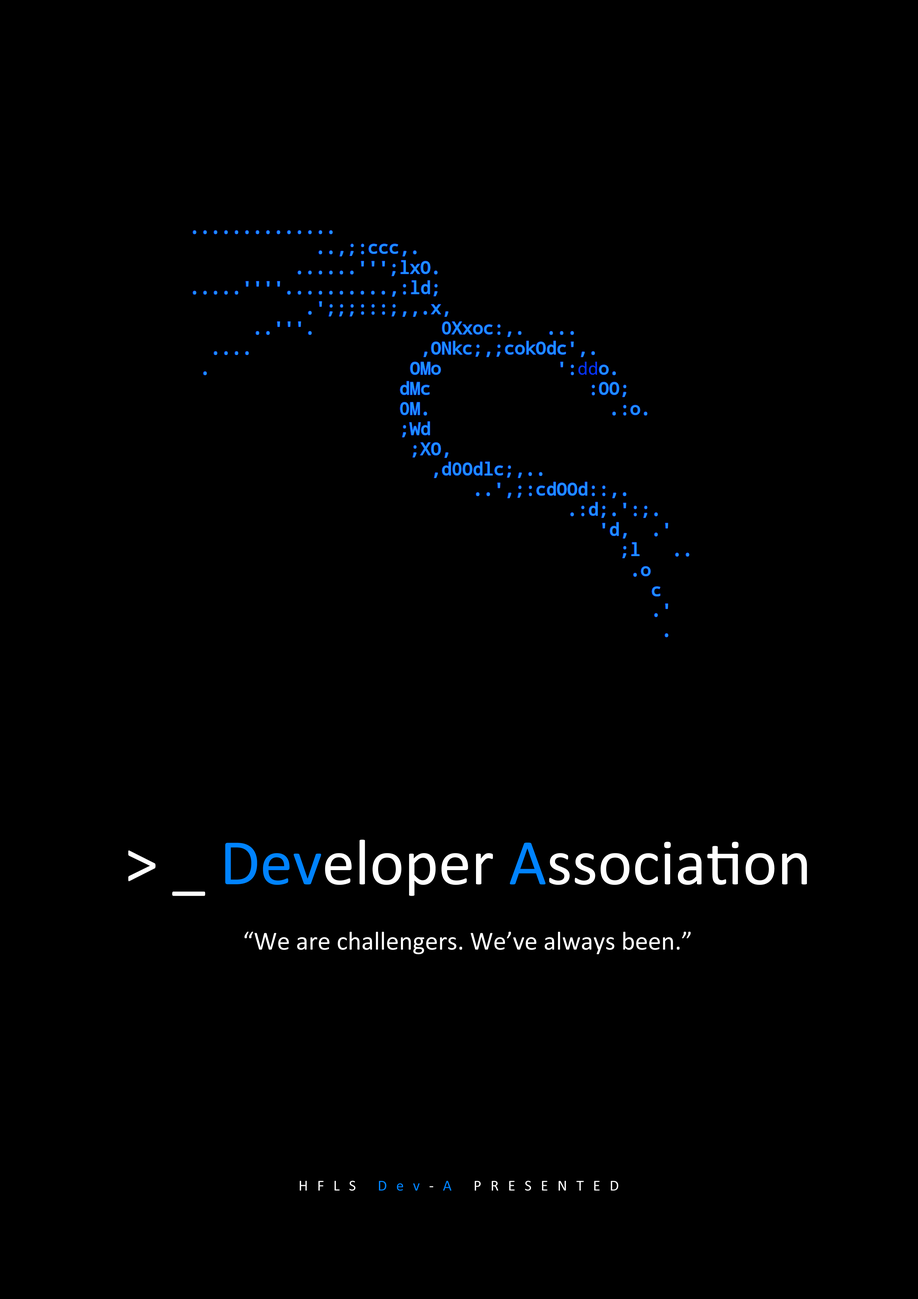
<style>
.page{position:relative;width:918px;height:1299px;background:#000000}
.page>*{position:absolute;margin:0}
.t1{font:65.4px "Calibri";color:#ffffff}
.t2{font:65.4px "Calibri";color:#0083ff}
.t3{font:26.2px "Calibri";color:#ffffff}
.t4{font:15.3px "Calibri";letter-spacing:0.6em;color:#ffffff}
.t5{font:15.3px "Calibri";letter-spacing:0.6em;color:#0083ff}
</style>
<div class="page">
<p class="t1" style="left:128px;top:839px;width:679px;height:57px">&gt; _ <span class="t2">Dev</span>eloper <span class="t2">A</span>ssociation</p>
<p class="t3" style="left:244px;top:931px;width:447px;height:23px">“We are challengers. We’ve always been.”</p>
<p class="t4" style="left:300px;top:1180px;width:319px;height:10px">HFLS <span class="t5">Dev</span>-<span class="t5">A </span>PRESENTED</p>
</div>
